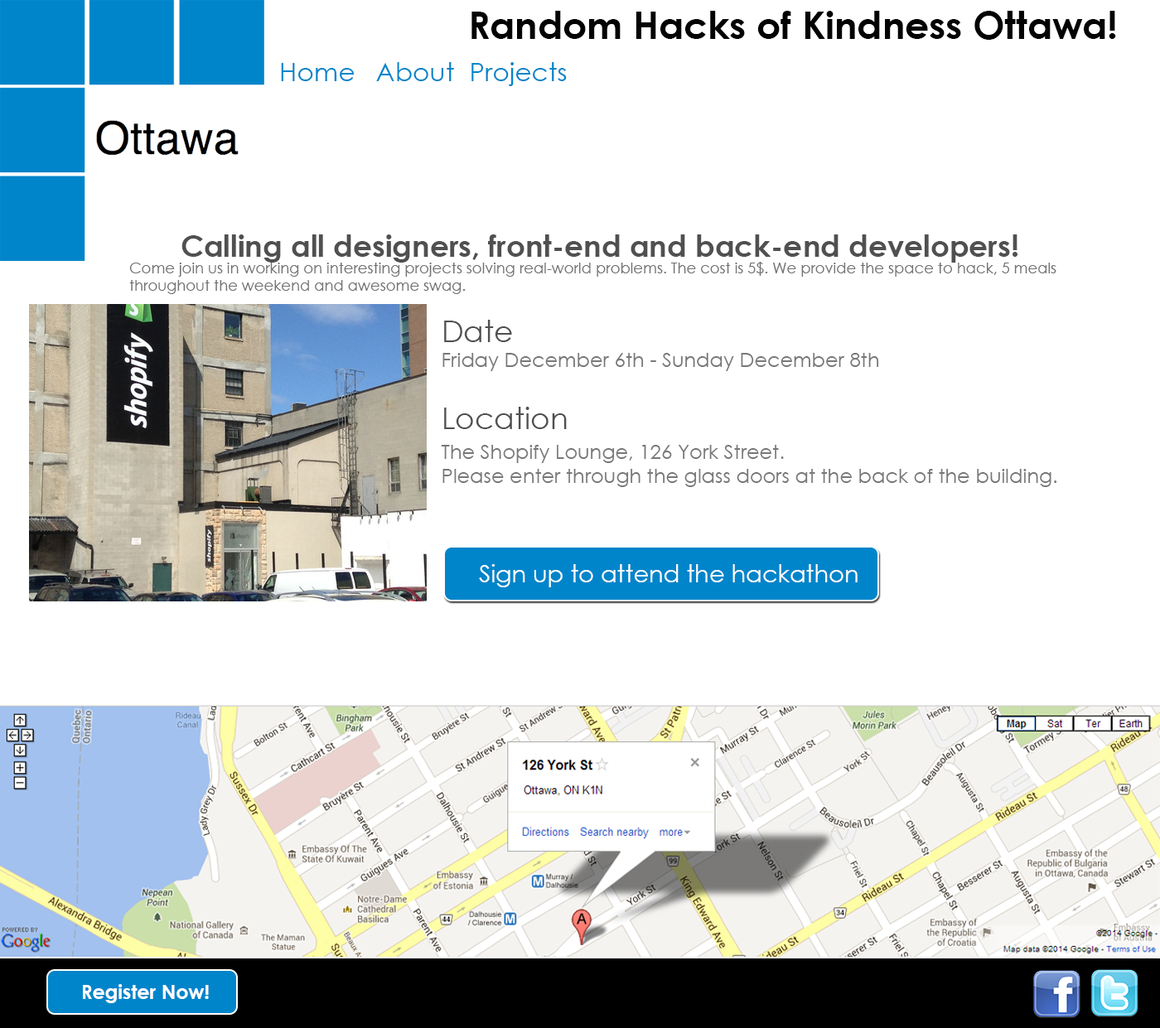
<style>
.page{position:relative;width:1160px;height:1028px;background:#ffffff}
.page>*{position:absolute;margin:0}
.t1{font:37.8px "CenturyGothic-Bold";color:#030303}
.t2{font:26px "CenturyGothic";color:#0085ca}
.t3{font:29.8px "CenturyGothic-Bold";color:#515050}
.t4{font:14.9px "CenturyGothic";color:#727272}
.t5{font:14.9px "CenturyGothic-Bold";color:#727272}
.t6{font:29.8px "CenturyGothic";color:#515050}
.t7{font:19.9px "CenturyGothic";color:#797878}
.t8{font:24px "CenturyGothic";color:#ffffff}
.t9{font:19.7px "CenturyGothic-Bold";color:#ffffff}
</style>
<div class="page">
<p class="t1" style="left:471px;top:11px;width:645px;height:29px">Random Hacks of Kindness Ottawa!</p>
<p class="t2" style="left:281px;top:63px;width:74px;height:18px">Home</p>
<p class="t2" style="left:376px;top:62px;width:78px;height:19px">About</p>
<p class="t2" style="left:471px;top:62px;width:96px;height:24px">Projects</p>
<p class="t3" style="left:181px;top:234px;width:836px;height:29px">Calling all designers, front-end and back-end developers!</p>
<p class="t4" style="left:129px;top:262px;width:927px;height:32px">Come join us in working on interesting projects solving real-world problems. The cost is 5$. We provide the space to hack, 5 meals <br>throughout the weekend and awesome swag<span class="t5">.</span></p>
<p class="t6" style="left:444px;top:320px;width:68px;height:22px">Date</p>
<p class="t7" style="left:442px;top:353px;width:437px;height:18px">Friday December 6th - Sunday December 8th</p>
<p class="t6" style="left:444px;top:407px;width:123px;height:22px">Location</p>
<p class="t7" style="left:441px;top:445px;width:616px;height:42px">The Shopify Lounge, 126 York Street. <br>Please enter through the glass doors at the back of the building.</p>
<p class="t8" style="left:479px;top:564px;width:378px;height:23px">Sign up to attend the hackathon</p>
<p class="t9" style="left:83px;top:984px;width:126px;height:19px">Register Now!</p>
</div>
